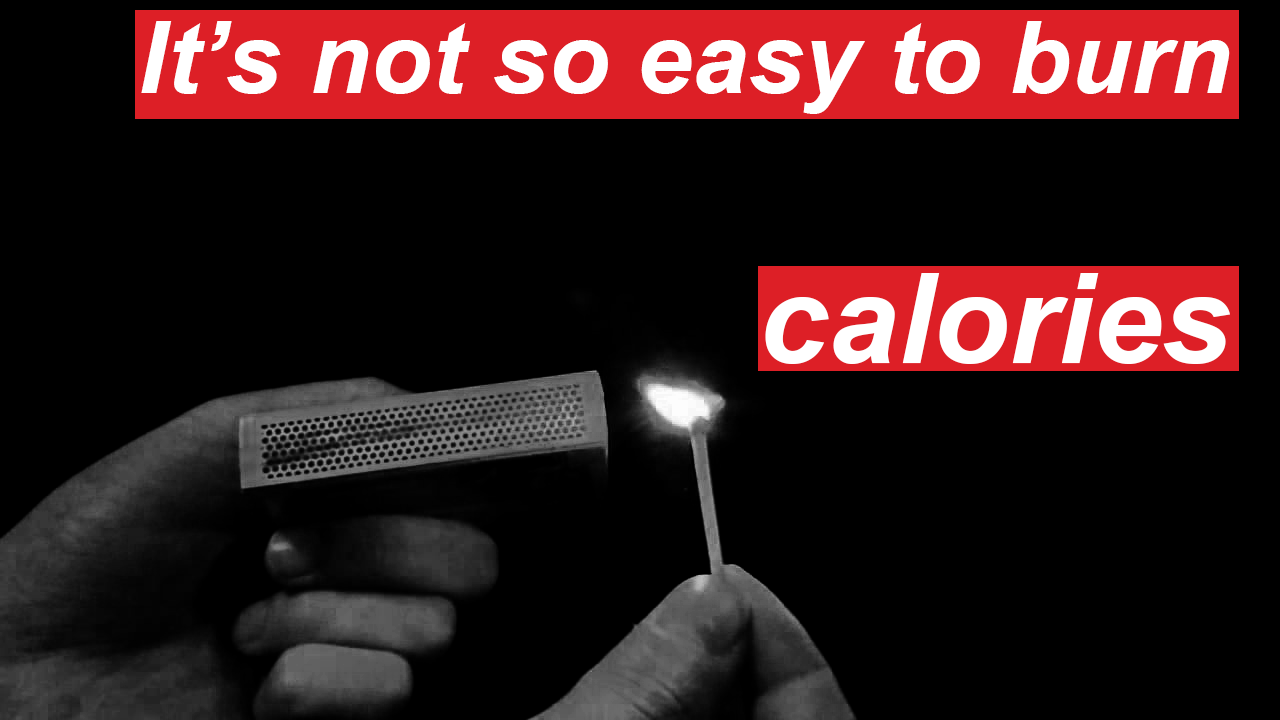
<style>
.page{position:relative;width:1280px;height:720px;background:#000000}
.page>*{position:absolute;margin:0}
.t1{font:100px "Arial-BoldItalicMT";color:#ffffff}
.t2{font:125px "Arial-BoldItalicMT";color:#ffffff}
</style>
<div class="page">
<p class="t1" style="left:141px;top:21px;width:1089px;height:343px;text-align:right">It’s not so easy to burn<br><br><span class="t2">calories</span></p>
</div>
